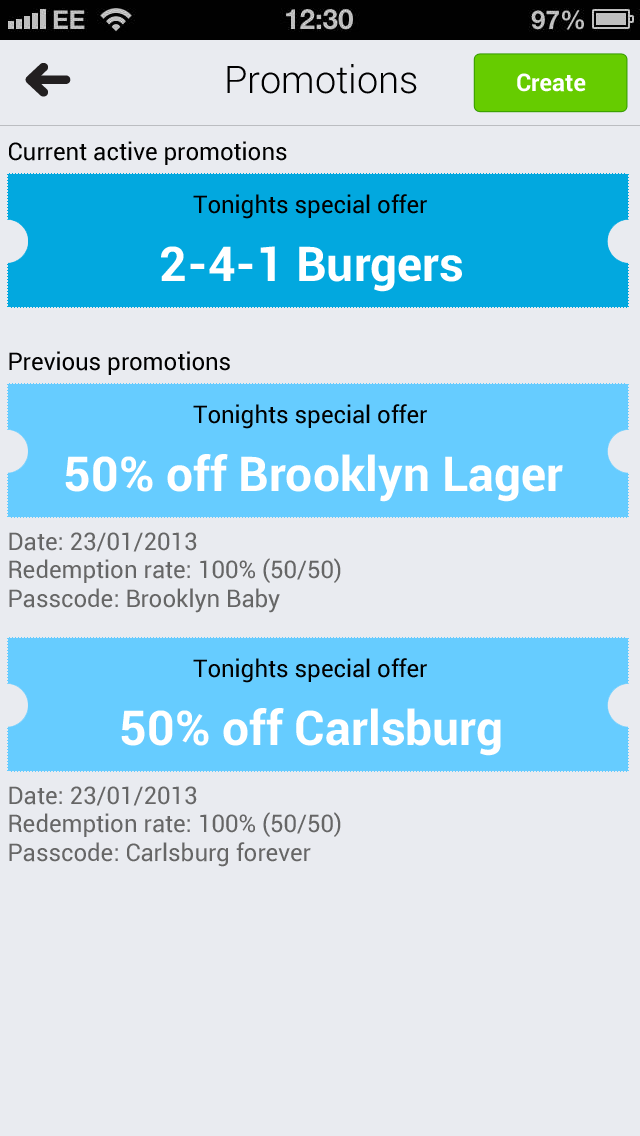
<style>
.page{position:relative;width:640px;height:1136px;background:#e9ebf0}
.page>*{position:absolute;margin:0}
.t1{font:38px "Roboto-Light";color:#000000}
.t2{font:24px "Roboto-Bold";color:#ffffff}
.t3{font:24px "Roboto-Regular";color:#000000}
.t4{font:48px "Roboto-Bold";color:#ffffff}
.t5{font:24px "Roboto-Regular";color:#666666}
</style>
<div class="page">
<p class="t1" style="left:227px;top:64px;width:190px;height:30px">Promotions</p>
<p class="t2" style="left:517px;top:73px;width:69px;height:19px">Create</p>
<p class="t3" style="left:9px;top:141px;width:278px;height:24px">Current active promotions</p>
<p class="t3" style="left:193px;top:194px;width:234px;height:25px">Tonights special offer</p>
<p class="t4" style="left:161px;top:246px;width:301px;height:46px">2-4-1 Burgers</p>
<p class="t3" style="left:9px;top:351px;width:221px;height:24px">Previous promotions</p>
<p class="t3" style="left:193px;top:404px;width:234px;height:25px">Tonights special offer</p>
<p class="t4" style="left:65px;top:454px;width:498px;height:48px">50% off Brooklyn Lager</p>
<p class="t5" style="left:9px;top:532px;width:332px;height:81px">Date: 23/01/2013   <br>Redemption rate: 100% (50/50)   <br>Passcode: Brooklyn Baby</p>
<p class="t3" style="left:193px;top:658px;width:234px;height:25px">Tonights special offer</p>
<p class="t4" style="left:121px;top:708px;width:380px;height:48px">50% off Carlsburg</p>
<p class="t5" style="left:9px;top:786px;width:332px;height:81px">Date: 23/01/2013   <br>Redemption rate: 100% (50/50)   <br>Passcode: Carlsburg forever</p>
</div>
